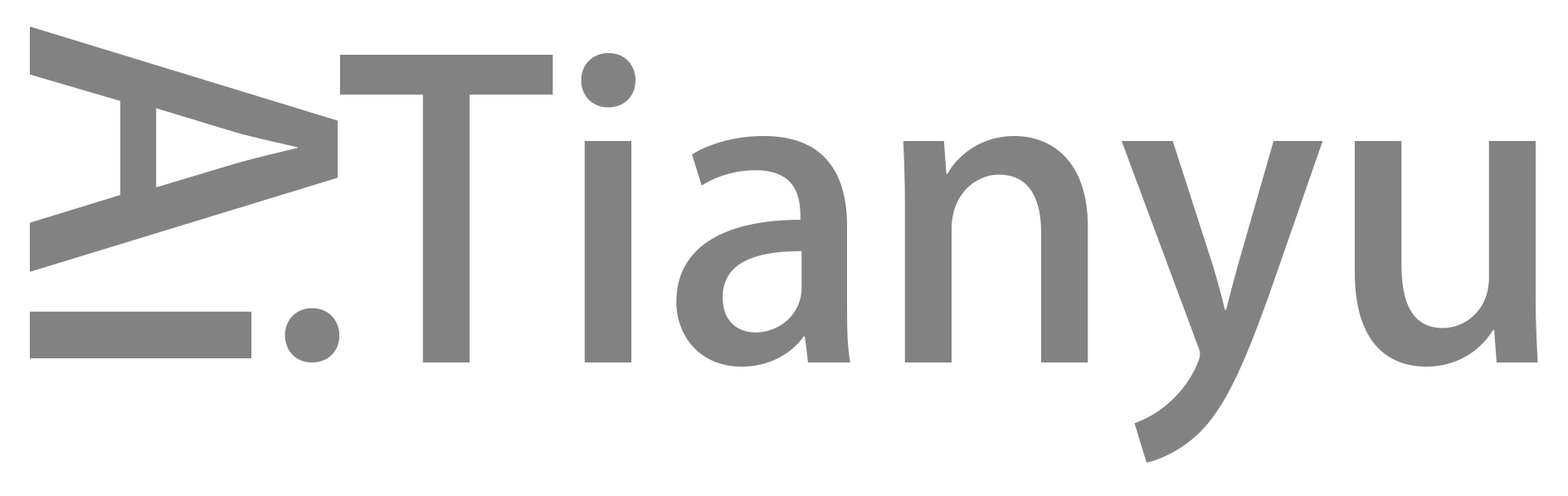
<style>
.page{position:relative;width:1568px;height:496px;background:#ffffff}
.page>*{position:absolute;margin:0}
.t1{font:402.1px "AdobeHeitiStd-Regular";color:#828282}
</style>
<div class="page">
<p class="t1" style="left:30px;top:27px;width:309px;height:336px;rotate:90deg">Ai</p>
<p class="t1" style="left:339px;top:53px;width:1199px;height:410px">Tianyu</p>
</div>
